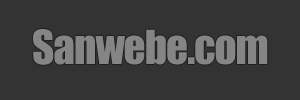
<style>
.page{position:relative;width:300px;height:100px;background:#333333}
.page>*{position:absolute;margin:0}
.t1{font:43.3px "Impact";letter-spacing:-0.025em;color:#858585}
</style>
<div class="page">
<p class="t1" style="left:33px;top:29px;width:235px;height:36px">Sanwebe.com</p>
</div>
